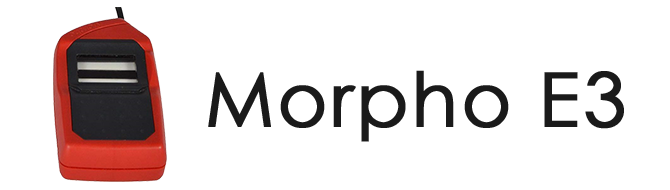
<style>
.page{position:relative;width:670px;height:190px;background:#ffffff}
.page>*{position:absolute;margin:0}
.t1{font:75px "CenturyGothic";letter-spacing:0.025em;color:#1a1a1a;font-weight:bold}
</style>
<div class="page">
<p class="t1" style="left:208px;top:70px;width:416px;height:72px">Morpho E3</p>
</div>
